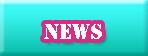
<style>
.page{position:relative;width:148px;height:56px}
.page>*{position:absolute;margin:0}
.t1{font:20px "StencilStd";color:#fcf6f6}
</style>
<div class="page">
<p class="t1" style="left:44px;top:24px;width:58px;height:15px">NEWS</p>
</div>
